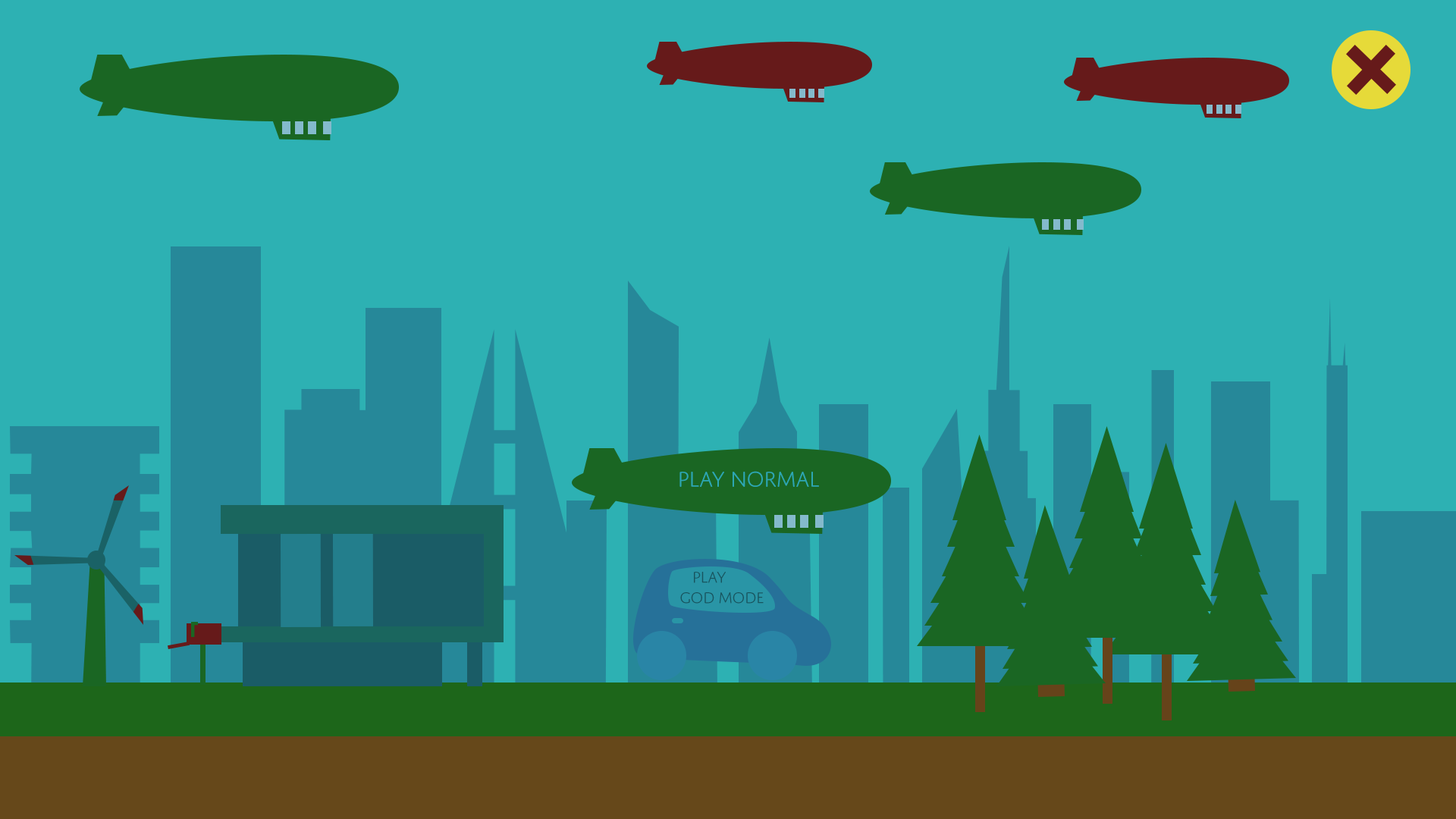
<style>
.page{position:relative;width:1456px;height:819px;background:#2db1b3}
.page>*{position:absolute;margin:0}
.t1{font:22.7px "DomusTitlingLight";letter-spacing:-0.04em;color:#2da7b3}
.t2{font:16.3px/20.5px "DomusTitlingLight";letter-spacing:-0.04em;color:#18545e}
</style>
<div class="page">
<p class="t1" style="left:679px;top:471px;width:140px;height:16px">Play Normal</p>
<p class="t2" style="left:680px;top:572px;width:84px;height:32px">play<br>god mode</p>
</div>
